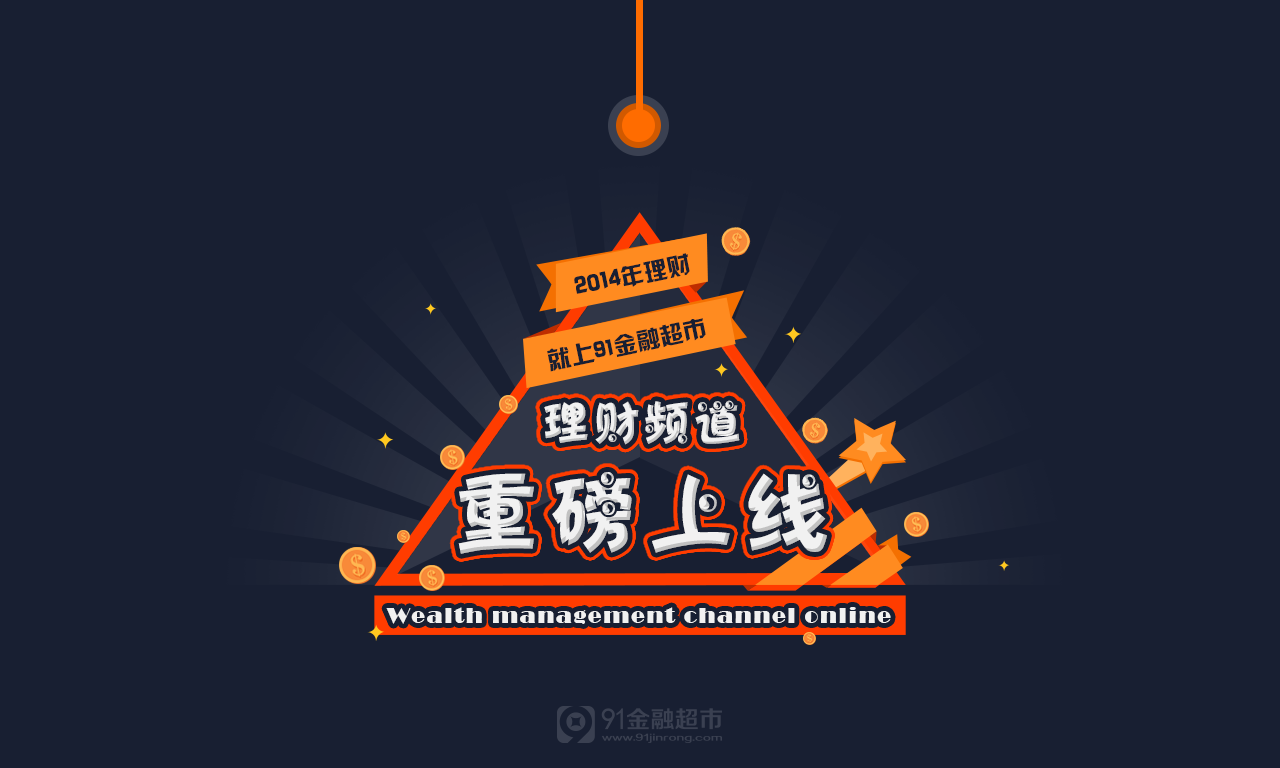
<style>
.page{position:relative;width:1280px;height:768px;background:#181f32}
.page>*{position:absolute;margin:0}
.t1{font:24.9px "HYk2gj";letter-spacing:0.01em;color:#181f32}
.t2{font:23.5px "HYk2gj";letter-spacing:0.01em;color:#181f32}
.t3{font:47.5px "HYo3gj";letter-spacing:0.07em;color:#f1f1f1}
.t4{font:86.9px "HYo3gj";letter-spacing:0.13em;color:#f1f1f1}
.t5{font:22.1px "Broadway";letter-spacing:0.075em;color:#f1f1f1}
</style>
<div class="page">
<p class="t1" style="left:574px;top:253px;width:116px;height:41px;rotate:-12deg">2014<span class="t2">年理财</span></p>
<p class="t2" style="left:547px;top:318px;width:159px;height:54px;rotate:-12deg">就上91金融超市</p>
<p class="t3" style="left:544px;top:400px;width:196px;height:45px">理财频道</p>
<p class="t4" style="left:458px;top:472px;width:369px;height:82px">重磅上线</p>
<p class="t5" style="left:386px;top:607px;width:505px;height:17px">Wealth management channel online</p>
</div>
